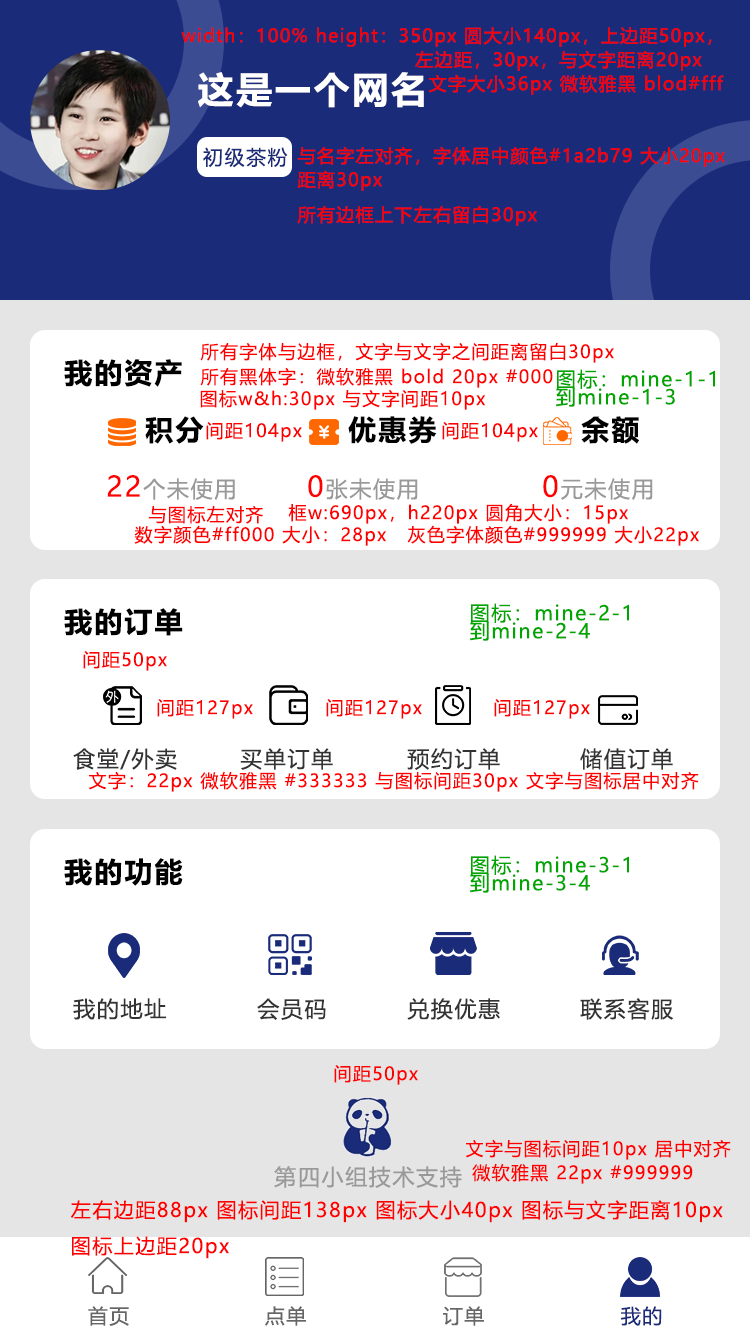
<style>
.page{position:relative;width:750px;height:1334px;background:#ffffff}
.page>*{position:absolute;margin:0}
.t1{font:18px/24px "MicrosoftYaHei";letter-spacing:0.075em;color:#ff0000}
.t2{font:36px "MicrosoftYaHei-Bold";letter-spacing:0.075em;color:#ffffff}
.t3{font:20px "MicrosoftYaHei";letter-spacing:0.075em;color:#1a2b79}
.t4{font:18px "MicrosoftYaHei";letter-spacing:0.075em;color:#ff0000}
.t5{font:28px "MicrosoftYaHei-Bold";letter-spacing:0.075em;color:#000000}
.t6{font:20px/18px "MicrosoftYaHei";letter-spacing:0.075em;color:#00a600}
.t7{font:22px "MicrosoftYaHei";letter-spacing:0.075em;color:#999999}
.t8{font:28px "MicrosoftYaHei";letter-spacing:0.075em;color:#ff0000}
.t9{font:22px "MicrosoftYaHei";letter-spacing:0.075em;color:#333333}
.t10{font:20px/18px "MicrosoftYaHei";letter-spacing:0.075em;color:#ff0000}
.t11{font:20px "MicrosoftYaHei";letter-spacing:0.075em;color:#666666}
</style>
<div class="page">
<p class="t1" style="left:181px;top:27px;width:543px;height:68px">width：100% height：350px 圆大小140px，上边距50px，<br>                                   左边距，30px，与文字距离20px<br>                                     文字大小36px 微软雅黑 blod#fff</p>
<p class="t2" style="left:198px;top:72px;width:226px;height:36px">这是一个网名</p>
<p class="t3" style="left:203px;top:147px;width:85px;height:21px">初级茶粉</p>
<p class="t1" style="left:297px;top:146px;width:428px;height:45px">与名字左对齐，字体居中颜色#1a2b79 大小20px<br>距离30px</p>
<p class="t4" style="left:297px;top:205px;width:240px;height:21px">所有边框上下左右留白30px</p>
<p class="t4" style="left:200px;top:342px;width:414px;height:21px">所有字体与边框，文字与文字之间距离留白30px</p>
<p class="t5" style="left:64px;top:359px;width:118px;height:28px">我的资产</p>
<p class="t4" style="left:200px;top:367px;width:353px;height:21px">所有黑体字：微软雅黑 bold 20px #000</p>
<p class="t6" style="left:556px;top:369px;width:159px;height:38px">图标：mine-1-1<br>到mine-1-3</p>
<p class="t4" style="left:200px;top:389px;width:286px;height:21px">图标w&amp;h:30px 与文字间距10px</p>
<p class="t5" style="left:145px;top:416px;width:59px;height:28px">积分</p>
<p class="t4" style="left:206px;top:422px;width:96px;height:20px">间距104px</p>
<p class="t5" style="left:348px;top:416px;width:89px;height:28px">优惠券</p>
<p class="t4" style="left:442px;top:422px;width:96px;height:20px">间距104px</p>
<p class="t5" style="left:581px;top:416px;width:58px;height:28px">余额</p>
<p class="t7" style="left:107px;top:475px;width:128px;height:25px"><span class="t8">22</span>个未使用</p>
<p class="t7" style="left:308px;top:475px;width:110px;height:25px"><span class="t8">0</span>张未使用</p>
<p class="t7" style="left:543px;top:475px;width:110px;height:25px"><span class="t8">0</span>元未使用</p>
<p class="t4" style="left:148px;top:506px;width:115px;height:18px">与图标左对齐</p>
<p class="t4" style="left:288px;top:503px;width:340px;height:21px">框w:690px，h220px 圆角大小：15px</p>
<p class="t4" style="left:134px;top:525px;width:565px;height:21px">数字颜色#ff000 大小：28px   灰色字体颜色#999999 大小22px</p>
<p class="t6" style="left:470px;top:603px;width:159px;height:38px">图标：mine-2-1<br>到mine-2-4</p>
<p class="t5" style="left:64px;top:608px;width:119px;height:28px">我的订单</p>
<p class="t4" style="left:83px;top:651px;width:84px;height:20px">间距50px</p>
<p class="t4" style="left:157px;top:699px;width:96px;height:20px">间距127px</p>
<p class="t4" style="left:326px;top:699px;width:96px;height:20px">间距127px</p>
<p class="t4" style="left:494px;top:699px;width:96px;height:20px">间距127px</p>
<p class="t9" style="left:73px;top:748px;width:104px;height:22px">食堂/外卖</p>
<p class="t9" style="left:240px;top:748px;width:93px;height:22px">买单订单</p>
<p class="t9" style="left:407px;top:748px;width:93px;height:22px">预约订单</p>
<p class="t9" style="left:580px;top:748px;width:93px;height:22px">储值订单</p>
<p class="t4" style="left:88px;top:771px;width:611px;height:21px">文字：22px 微软雅黑 #333333 与图标间距30px 文字与图标居中对齐</p>
<p class="t6" style="left:470px;top:855px;width:159px;height:38px">图标：mine-3-1<br>到mine-3-4</p>
<p class="t5" style="left:64px;top:858px;width:119px;height:28px">我的功能</p>
<p class="t9" style="left:73px;top:998px;width:93px;height:22px">我的地址</p>
<p class="t9" style="left:257px;top:998px;width:69px;height:22px">会员码</p>
<p class="t9" style="left:407px;top:998px;width:93px;height:22px">兑换优惠</p>
<p class="t9" style="left:580px;top:998px;width:94px;height:22px">联系客服</p>
<p class="t4" style="left:334px;top:1065px;width:84px;height:20px">间距50px</p>
<p class="t1" style="left:465px;top:1139px;width:266px;height:45px">文字与图标间距10px 居中对齐<br> 微软雅黑 22px #999999</p>
<p class="t7" style="left:274px;top:1166px;width:188px;height:22px">第四小组技术支持</p>
<p class="t10" style="left:71px;top:1200px;width:652px;height:59px">左右边距88px 图标间距138px 图标大小40px 图标与文字距离10px <br><br>图标上边距20px</p>
<p class="t11" style="left:88px;top:1306px;width:41px;height:20px">首页</p>
<p class="t11" style="left:265px;top:1306px;width:41px;height:20px">点单</p>
<p class="t11" style="left:443px;top:1306px;width:41px;height:20px">订单</p>
<p class="t3" style="left:621px;top:1306px;width:41px;height:20px">我的</p>
</div>
